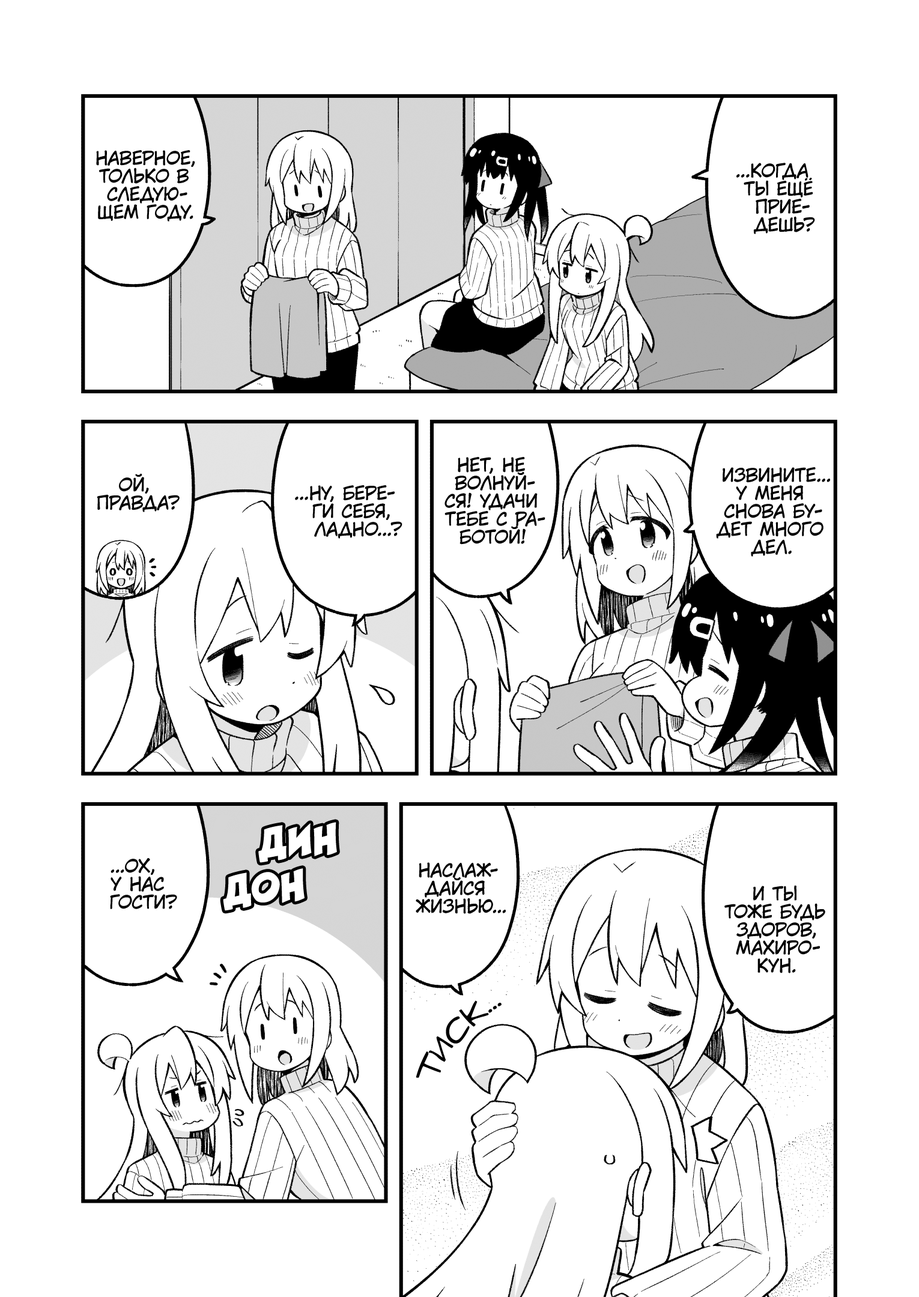
<style>
.page{position:relative;width:919px;height:1297px;background:#ffffff}
.page>*{position:absolute;margin:0}
.t1{font:18px "KuraiVoice2";color:#000000;text-transform:uppercase}
.t2{font:39.6px "v_CCRatatatat";color:#ffffff;text-transform:uppercase}
.t3{font:28.8px "v_Augie";color:#000000;text-transform:uppercase}
</style>
<div class="page">
<p class="t1" style="left:96px;top:150px;width:99px;height:72px;text-align:center">Наверное,<br>только в<br>следую-<br>щем году.</p>
<p class="t1" style="left:736px;top:163px;width:79px;height:71px;text-align:center">...Когда<br>ты ещё<br>прие-<br>дешь?</p>
<p class="t1" style="left:445px;top:457px;width:100px;height:88px;text-align:center">Нет, не<br>волнуй-<br>ся! Удачи<br>тебе с ра-<br>ботой!</p>
<p class="t1" style="left:97px;top:473px;width:83px;height:39px;text-align:center">Ой,<br>правда?</p>
<p class="t1" style="left:716px;top:467px;width:114px;height:90px;text-align:center">Извините...<br>У меня<br>снова бу-<br>дет много<br>дел.</p>
<p class="t1" style="left:295px;top:485px;width:107px;height:54px;text-align:center">...Ну, бере-<br>ги себя,<br>ладно...?</p>
<p class="t2" style="left:258px;top:822px;width:79px;height:41px;rotate:-2deg">дин</p>
<p class="t1" style="left:110px;top:858px;width:67px;height:51px;text-align:center">...Ох,<br>у нас<br>гости?</p>
<p class="t2" style="left:223px;top:869px;width:82px;height:42px;rotate:-3deg">дон</p>
<p class="t1" style="left:416px;top:863px;width:90px;height:51px;text-align:center">Наслаж-<br>дайся<br>жизнью...</p>
<p class="t1" style="left:724px;top:885px;width:101px;height:89px;text-align:center">И ты<br>тоже будь<br>здоров,<br>Махиро-<br>кун.</p>
<p class="t3" style="left:416px;top:1001px;width:86px;height:77px;rotate:-50deg">тиск...</p>
</div>
